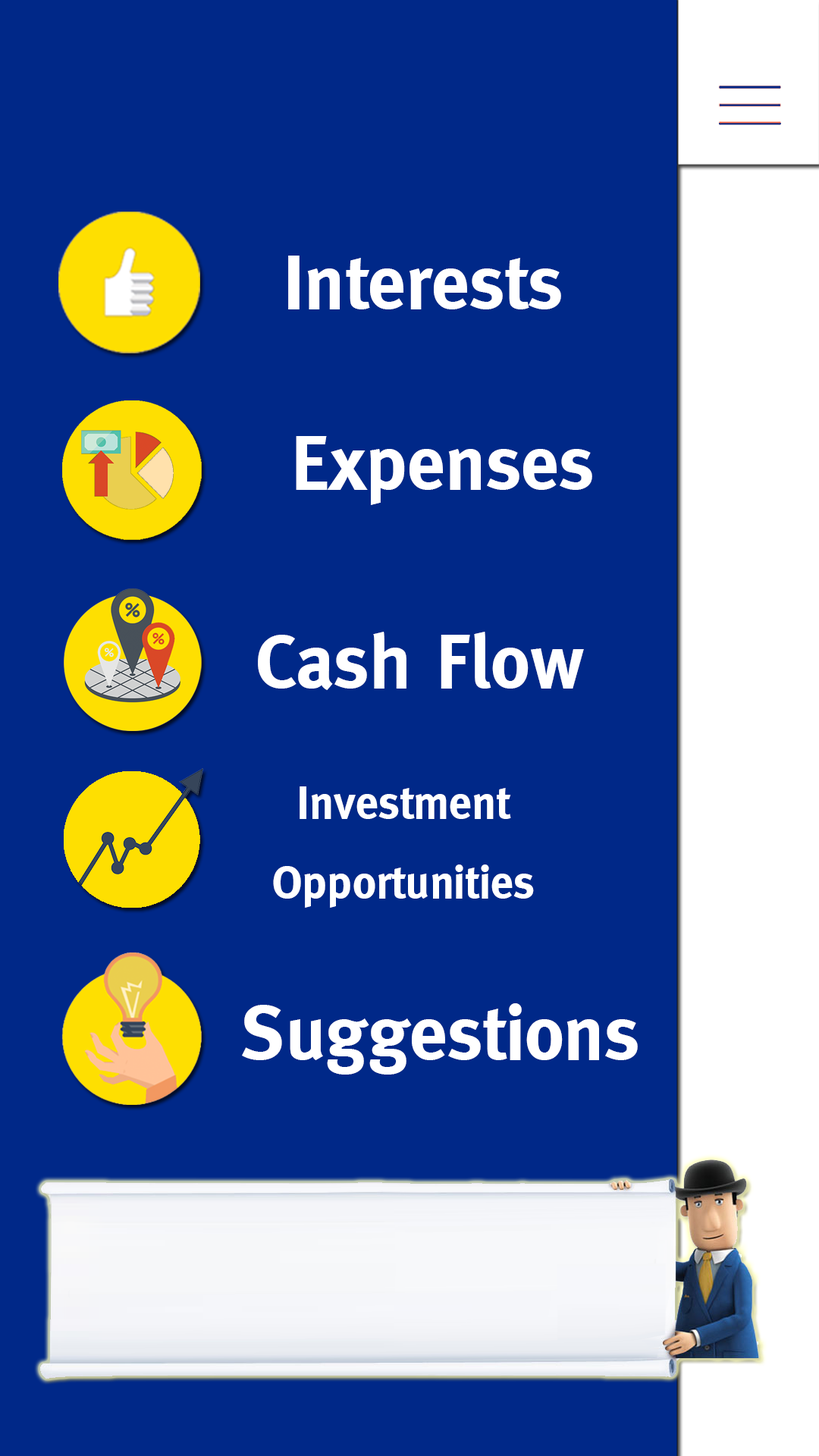
<style>
.page{position:relative;width:819px;height:1456px;background:#002888}
.page>*{position:absolute;margin:0}
.t1{font:75.8px "MetaBold";color:#ffffff}
.t2{font:45.5px "MetaBold";color:#ffffff}
</style>
<div class="page">
<p class="t1" style="left:288px;top:256px;width:273px;height:53px">Interests</p>
<p class="t1" style="left:296px;top:436px;width:296px;height:69px">Expenses</p>
<p class="t1" style="left:258px;top:632px;width:326px;height:58px">Cash Flow</p>
<p class="t2" style="left:273px;top:786px;width:261px;height:122px;text-align:center">Investment<br>Opportunities</p>
<p class="t1" style="left:242px;top:1003px;width:396px;height:72px">Suggestions</p>
</div>
